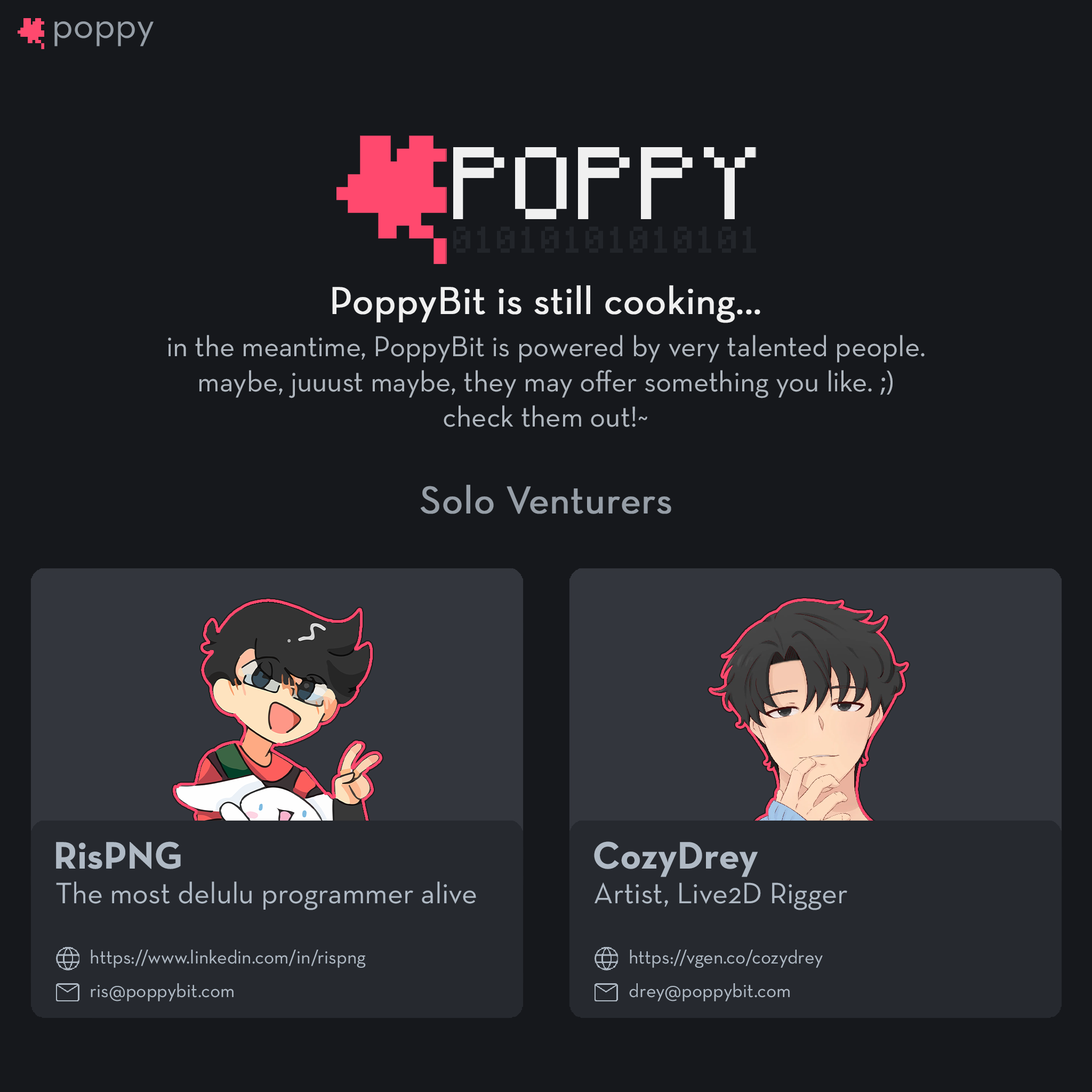
<style>
.page{position:relative;width:1092px;height:1092px;background:#16181c}
.page>*{position:absolute;margin:0}
.t1{font:38.9px "NeutraText-Book";color:#969ea7}
.t2{font:38.9px "NeutraText-Book";color:#f0f0f0;font-weight:bold}
.t3{font:29.2px "NeutraText-Book";color:#afb6be}
.t4{font:29.2px "MyriadPro-Regular";color:#afb6be}
.t5{font:38.9px "NeutraText-Book";color:#969ea7;font-weight:bold}
.t6{font:38.9px "NeutraText-Bold";color:#b0bac5}
.t7{font:39.1px "NeutraText-Bold";color:#b0bac5}
.t8{font:30px "NeutraText-Book";color:#b0bac5}
.t9{font:19.2px "NeutraText-Book";color:#b0bac5}
</style>
<div class="page">
<p class="t1" style="left:54px;top:21px;width:100px;height:25px">poppy</p>
<p class="t2" style="left:332px;top:285px;width:428px;height:38px">PoppyBit is still cooking...</p>
<p class="t3" style="left:168px;top:335px;width:757px;height:92px;text-align:center">in the meantime, PoppyBit is powered by very talented people.<br>maybe, juuust maybe, they may offer something you like. <span class="t4">;)<br></span>check them out!~</p>
<p class="t5" style="left:421px;top:485px;width:250px;height:29px">Solo Venturers</p>
<p class="t6" style="left:56px;top:841px;width:125px;height:28px">RisPNG</p>
<p class="t7" style="left:594px;top:841px;width:164px;height:36px">CozyDrey</p>
<p class="t8" style="left:56px;top:881px;width:420px;height:29px">The most delulu programmer alive</p>
<p class="t8" style="left:595px;top:882px;width:252px;height:28px">Artist, Live2D Rigger</p>
<p class="t9" style="left:91px;top:950px;width:275px;height:18px">https://www.linkedin.com/in/rispng</p>
<p class="t9" style="left:630px;top:950px;width:193px;height:18px">https://vgen.co/cozydrey</p>
<p class="t9" style="left:91px;top:983px;width:143px;height:18px">ris@poppybit.com</p>
<p class="t9" style="left:629px;top:983px;width:161px;height:18px">drey@poppybit.com</p>
</div>
